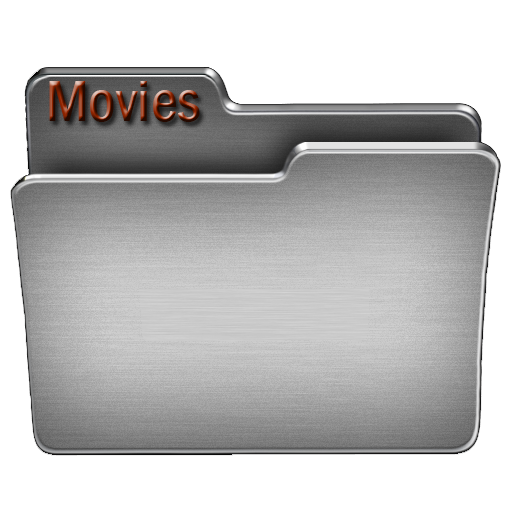
<style>
.page{position:relative;width:512px;height:512px;background:#ffffff}
.page>*{position:absolute;margin:0}
.t1{font:60px "FranklinGothic-MediumCond"}
</style>
<div class="page">
<p class="t1" style="left:49px;top:81px;width:151px;height:41px">Movies</p>
</div>
